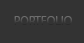
<style>
.page{position:relative;width:84px;height:43px;background:#333333}
.page>*{position:absolute;margin:0}
.t1{font:12px "MyriadPro-Regular"}
</style>
<div class="page">
<p class="t1" style="left:14px;top:16px;width:58px;height:9px">PORTFOLIO</p>
</div>
